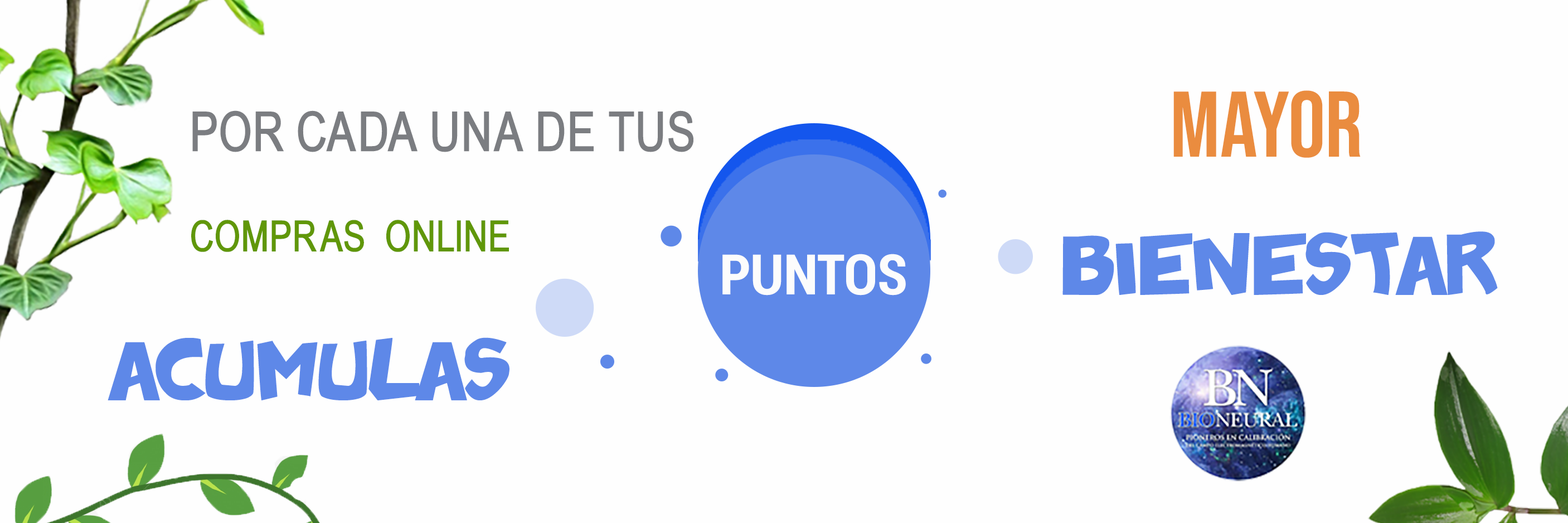
<style>
.page{position:relative;width:1568px;height:523px;background:#fefefe}
.page>*{position:absolute;margin:0}
.t1{font:93px "BebasNeue-Regular";color:#ea8c3f}
.t2{font:53.4px "BabelSans-Bold";color:#7b7d81}
.t3{font:41.8px "BabelSans-Bold";color:#609709}
.t4{font:58.1px "badonk-a-donk2";color:#5e88e8}
.t5{font:55.8px "Roboto-BoldCondensed";color:#fcfcfc}
</style>
<div class="page">
<p class="t1" style="left:1173px;top:90px;width:188px;height:68px">MAYOR</p>
<p class="t2" style="left:191px;top:110px;width:502px;height:142px">POR CADA UNA DE TUS <br><span class="t3"><br>COMPRAS  ONLINE</span></p>
<p class="t4" style="left:1062px;top:231px;width:436px;height:64px">BIENESTAR</p>
<p class="t5" style="left:722px;top:254px;width:184px;height:41px">PUNTOS</p>
<p class="t4" style="left:108px;top:337px;width:401px;height:63px">ACUMULAS</p>
</div>
